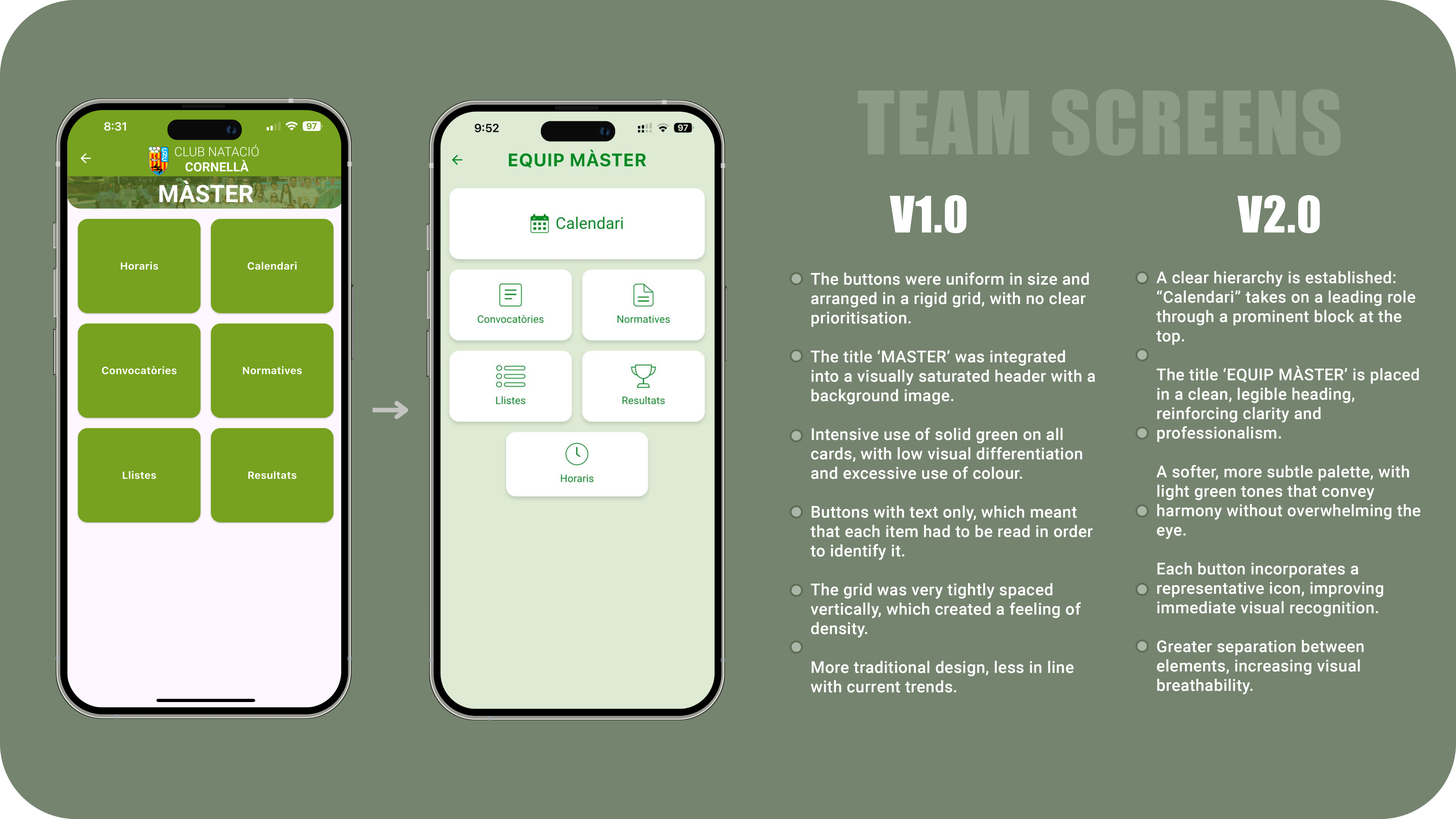
<style>
.page{position:relative;width:1456px;height:819px;background:#75846f}
.page>*{position:absolute;margin:0}
.t1{font:80.9px "Impact";letter-spacing:0.02em;color:#8c9b86}
.t2{font:46.2px "Impact";letter-spacing:0.02em;color:#ffffff}
.t3{font:16.2px "Roboto-Medium";letter-spacing:0.02em;color:#ffffff}
</style>
<div class="page">
<p class="t1" style="left:858px;top:89px;width:483px;height:67px">TEAM SCREENS</p>
<p class="t2" style="left:890px;top:195px;width:77px;height:38px">V1.0</p>
<p class="t2" style="left:1237px;top:195px;width:83px;height:38px">V2.0</p>
<p class="t3" style="left:810px;top:272px;width:285px;height:421px">The buttons were uniform in size and arranged in a rigid grid, with no clear prioritisation.<br><br>The title ‘MASTER’ was integrated into a visually saturated header with a background image.<br><br>Intensive use of solid green on all cards, with low visual differentiation and excessive use of colour.<br><br>Buttons with text only, which meant that each item had to be read in order to identify it.<br><br>The grid was very tightly spaced vertically, which created a feeling of density.<br><br>More traditional design, less in line with current trends.</p>
<p class="t3" style="left:1156px;top:271px;width:264px;height:423px">A clear hierarchy is established: “Calendari” takes on a leading role through a prominent block at the top.<br><br>The title ‘EQUIP MÀSTER’ is placed in a clean, legible heading, reinforcing clarity and professionalism.<br><br>A softer, more subtle palette, with light green tones that convey harmony without overwhelming the eye.<br><br>Each button incorporates a representative icon, improving immediate visual recognition.<br><br>Greater separation between elements, increasing visual breathability.<br><br>More contemporary aesthetics: cards, stylised icons, soft colours, cleaner typography.</p>
</div>
